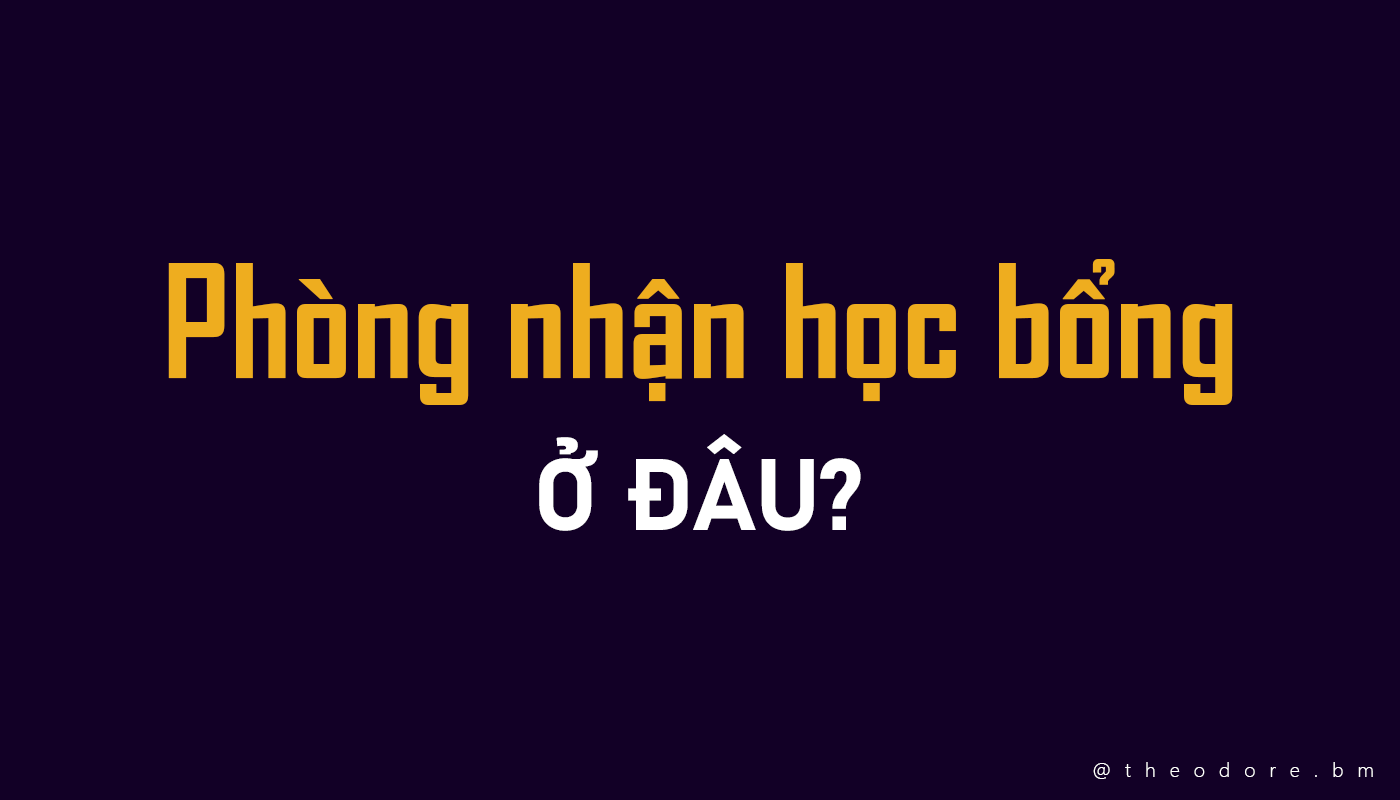
<style>
.page{position:relative;width:1400px;height:800px;background:#120026}
.page>*{position:absolute;margin:0}
.t1{font:150px "SVN-AgencyFBbold";color:#eead1f}
.t2{font:100px "Bahnschrift-Bold";color:#ffffff}
.t3{font:20px "SegoeUI-Light";letter-spacing:0.7em;color:#ffffff}
</style>
<div class="page">
<p class="t1" style="left:168px;top:259px;width:1065px;height:146px">Phòng nhận học bổng</p>
<p class="t2" style="left:539px;top:434px;width:322px;height:97px">Ở ĐÂU?</p>
<p class="t3" style="left:1093px;top:762px;width:280px;height:17px">@theodore.bm</p>
</div>
